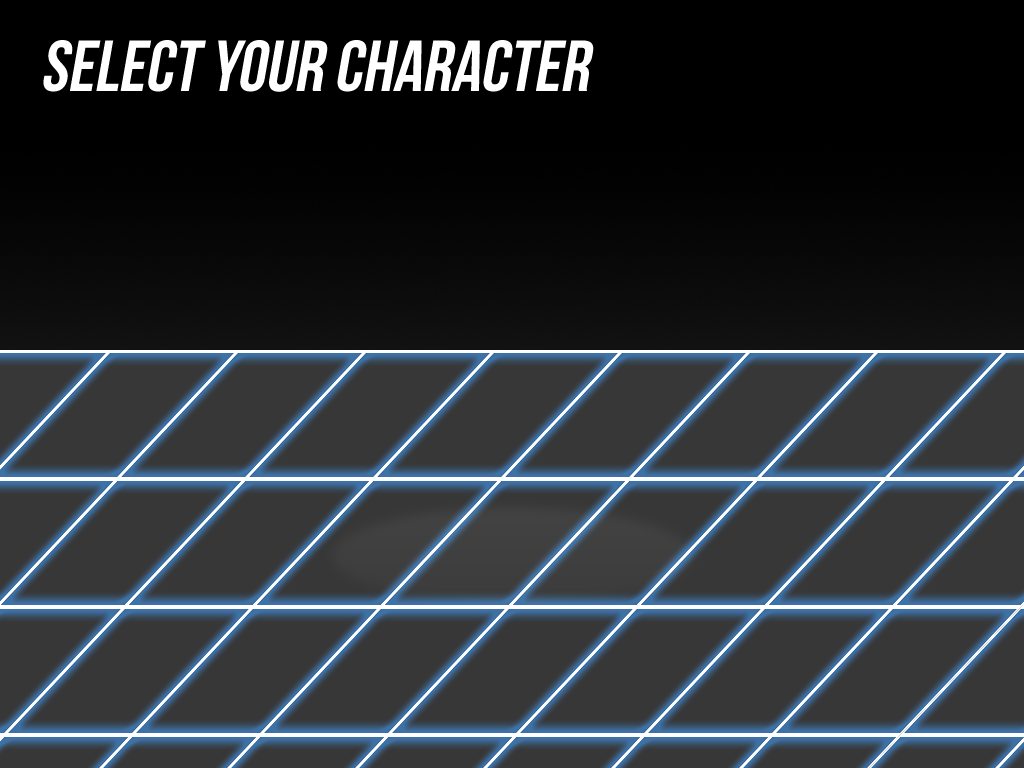
<style>
.page{position:relative;width:1024px;height:768px;background:#373737}
.page>*{position:absolute;margin:0}
.t1{font:72px "BebasNeueBold";color:#ffffff;font-style:italic}
</style>
<div class="page">
<p class="t1" style="left:43px;top:40px;width:551px;height:52px">select your character</p>
</div>
